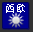
<style>
.page{position:relative;width:33px;height:32px;background:#000090}
.page>*{position:absolute;margin:0}
.t1{font:10.4px "SimSun";color:#ffffff}
</style>
<div class="page">
<p class="t1" style="left:6px;top:4px;width:19px;height:9px">西欧</p>
</div>
